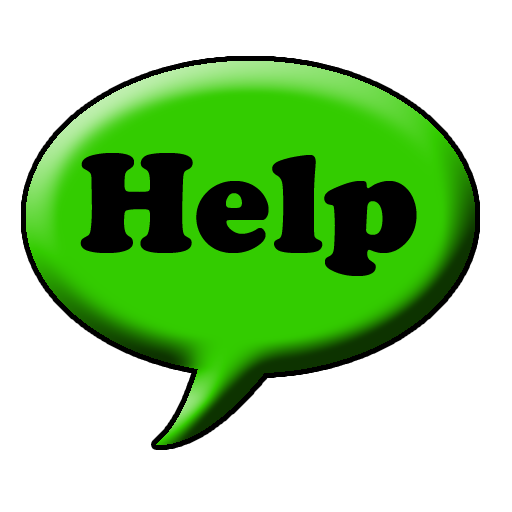
<style>
.page{position:relative;width:512px;height:512px;background:#ffffff}
.page>*{position:absolute;margin:0}
.t1{font:144px "CooperBlack";color:#000000}
</style>
<div class="page">
<p class="t1" style="left:80px;top:153px;width:337px;height:123px">Help</p>
</div>
